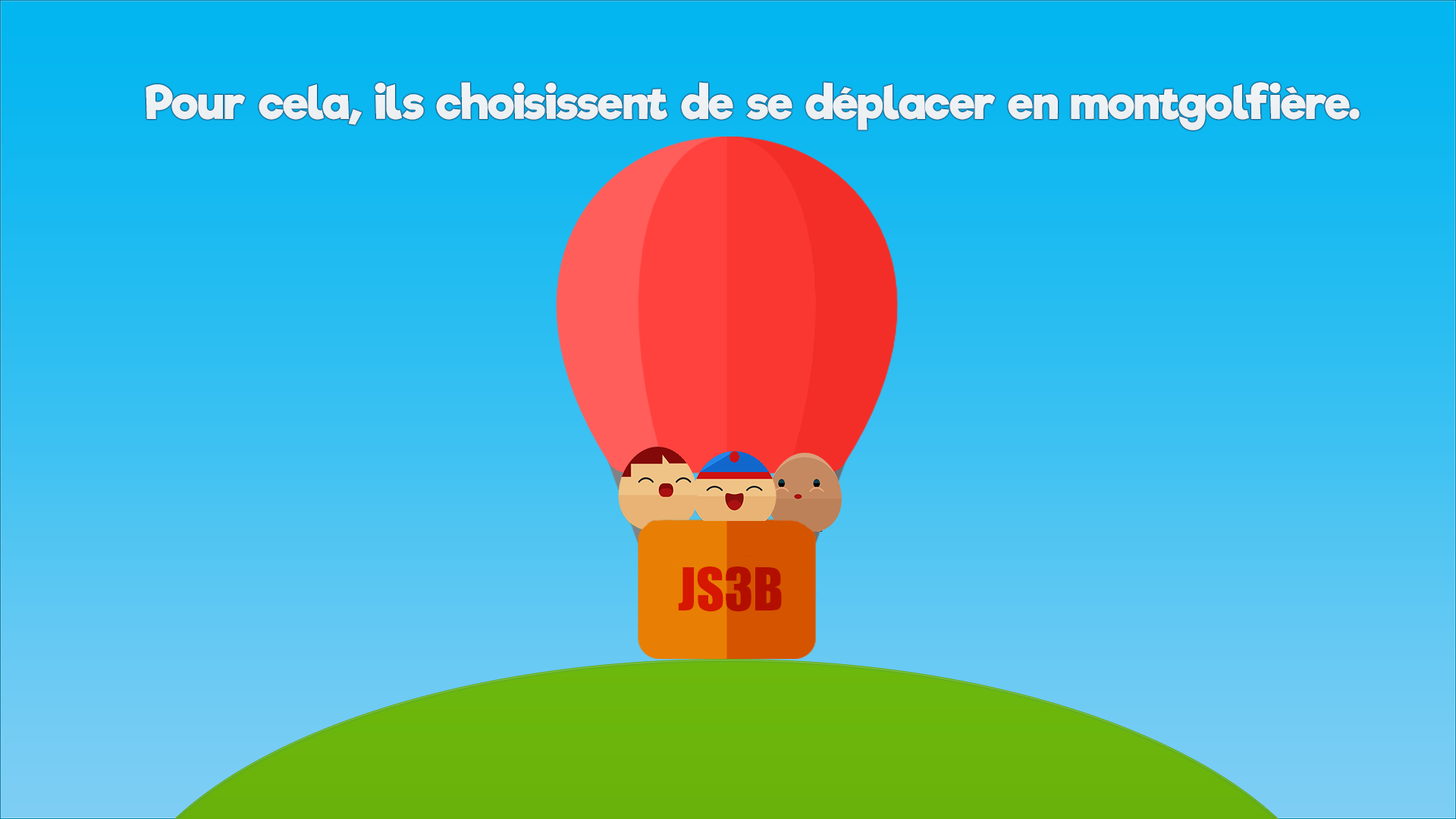
<style>
.page{position:relative;width:1456px;height:819px}
.page>*{position:absolute;margin:0}
.t1{font:45.5px "RifficFree-Bold";color:#edf1f3}
.t2{font:54.6px "Impact"}
</style>
<div class="page">
<p class="t1" style="left:146px;top:82px;width:1214px;height:48px">Pour cela, ils choisissent de se déplacer en montgolfière.</p>
<p class="t2" style="left:678px;top:566px;width:104px;height:46px">JS3B</p>
</div>
